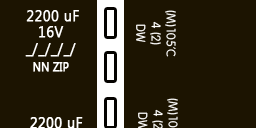
<style>
.page{position:relative;width:256px;height:128px;background:#1c1401}
.page>*{position:absolute;margin:0}
.t1{font:15.7px/16.7px "SegoeUI";letter-spacing:0.02em;color:#ffffff;font-weight:bold;scale:0.89 1}
.t2{font:11.8px/16.7px "SegoeUI";letter-spacing:0.02em;color:#ffffff;font-weight:bold;scale:0.89 1}
.t3{font:12.5px "Vagabond";color:#ffffff}
</style>
<div class="page">
<p class="t1" style="left:25px;top:10px;width:54px;height:62px;text-align:center">2200 uF<br>16V<br>_/_/_/_/<br><span class="t2">NN ZIP</span></p>
<p class="t3" style="left:136px;top:10px;width:40px;height:47px;text-align:center;rotate:90deg">(M)105’C<br>4 (2)<br>DW</p>
</div>
